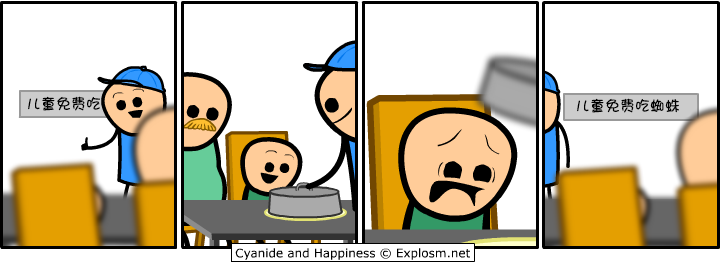
<style>
.page{position:relative;width:720px;height:265px;background:#ffffff}
.page>*{position:absolute;margin:0}
.t1{font:15px "DFGirl";color:#000000}
</style>
<div class="page">
<p class="t1" style="left:28px;top:96px;width:72px;height:15px">儿童免费吃</p>
<p class="t1" style="left:577px;top:98px;width:102px;height:15px">儿童免费吃蜘蛛</p>
</div>
